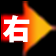
<style>
.page{position:relative;width:56px;height:56px;background:#000000}
.page>*{position:absolute;margin:0}
.t1{font:28px "KozGoPr6N-Heavy";color:#ffffff}
</style>
<div class="page">
<p class="t1" style="left:3px;top:15px;width:27px;height:28px">右</p>
</div>
